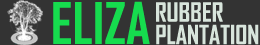
<style>
.page{position:relative;width:260px;height:45px;background:#333333}
.page>*{position:absolute;margin:0}
.t1{font:54.9px "AgencyFB-Bold";color:#16dc4e}
.t2{font:25.1px "AgencyFB-Bold";color:#d8e5dc}
</style>
<div class="page">
<p class="t1" style="left:53px;top:1px;width:97px;height:43px">ELIZA</p>
<p class="t2" style="left:156px;top:2px;width:67px;height:20px">RUBBER</p>
<p class="t2" style="left:156px;top:24px;width:103px;height:21px">PLANTATION</p>
</div>
